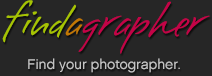
<style>
.page{position:relative;width:212px;height:76px;background:#262626}
.page>*{position:absolute;margin:0}
.t1{font:64px "BrisaAlternates";letter-spacing:-0.01em;color:#c30347}
.t2{font:64px "BrisaAlternates";letter-spacing:-0.01em;color:#a6c303}
.t3{font:64px "BrisaAlternates";letter-spacing:-0.01em;color:#c37803}
.t4{font:14px "Chalet-LondonNineteenSixty";letter-spacing:-0.01em;color:#c4c4c4}
</style>
<div class="page">
<p class="t1" style="left:2px;top:0px;width:208px;height:54px"><span class="t2">find</span><span class="t3">a</span>grapher</p>
<p class="t4" style="left:28px;top:58px;width:152px;height:15px">Find your photographer.</p>
</div>
